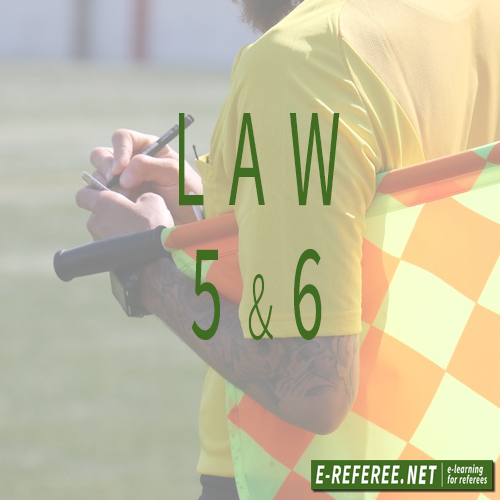
<style>
.page{position:relative;width:500px;height:500px}
.page>*{position:absolute;margin:0}
.t1{font:139.5px/134.2px "SourceSansPro-Regular";letter-spacing:0.36em;color:#416d23;scale:0.48 1}
.t2{font:97.7px/134.2px "SourceSansPro-Light";letter-spacing:0.36em;color:#416d23;scale:0.48 1}
</style>
<div class="page">
<p class="t1" style="left:179px;top:113px;width:161px;height:227px;text-align:center">LAW<br>5<span class="t2">&amp;</span>6</p>
</div>
